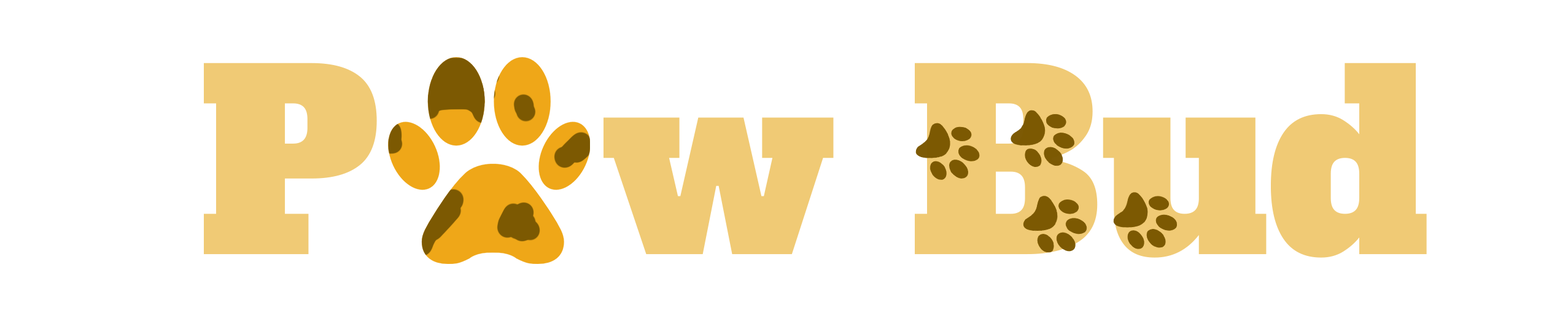
<style>
.page{position:relative;width:1568px;height:321px;background:#ffffff}
.page>*{position:absolute;margin:0}
.t1{font:245.6px "AlfaSlabOne-Regular";color:#f0ca75}
</style>
<div class="page">
<p class="t1" style="left:204px;top:63px;width:1223px;height:195px">P   w Bud</p>
</div>
